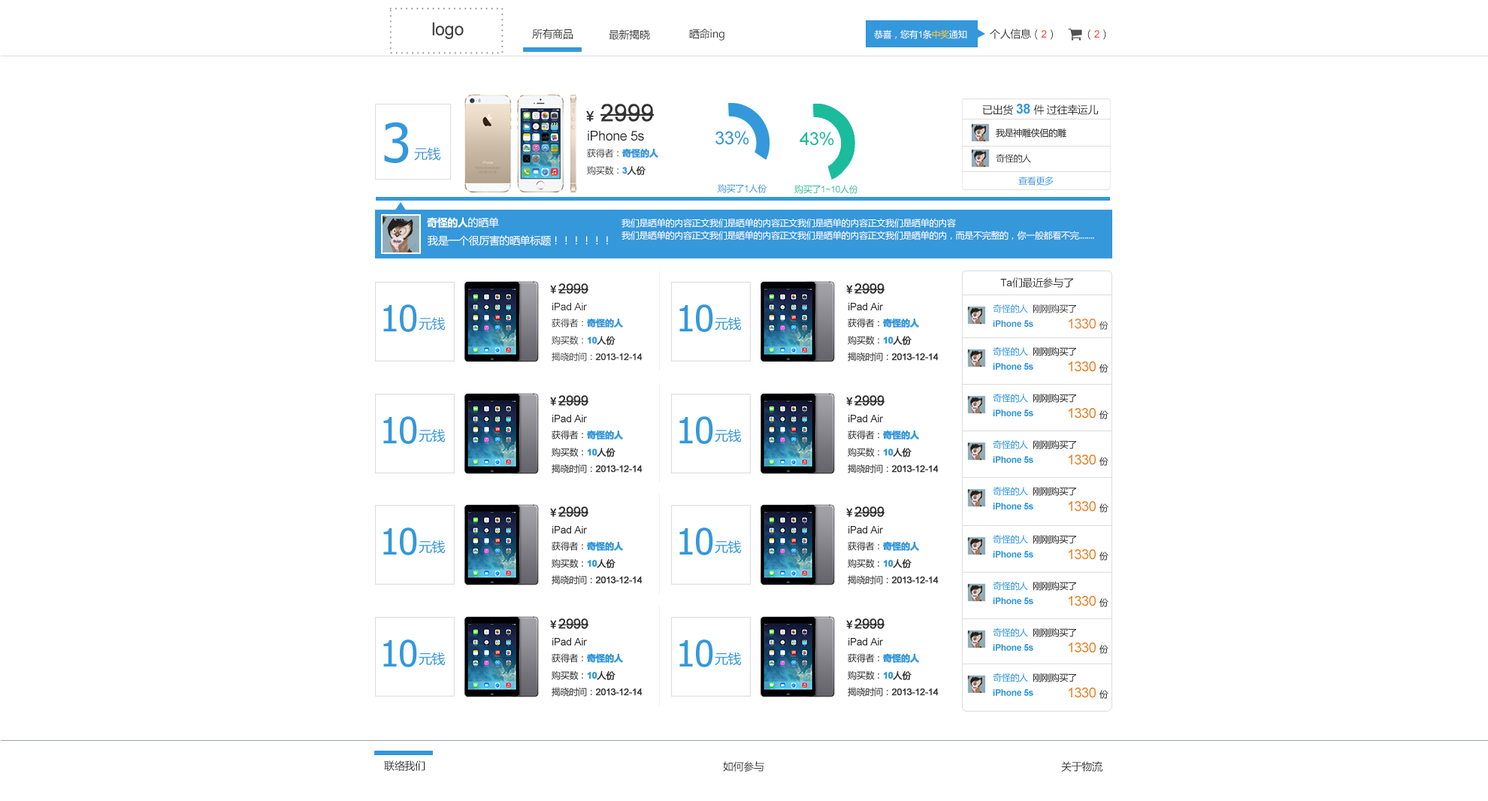
<style>
.page{position:relative;width:1488px;height:801px;background:#ffffff}
.page>*{position:absolute;margin:0}
.t1{font:10.5px "MicrosoftYaHei";letter-spacing:-0.025em;color:#333333}
.t2{font:10.5px "ArialMT";letter-spacing:-0.025em;color:#e74c3c}
.t3{font:9px "MicrosoftYaHei";letter-spacing:-0.025em;color:#ffffff}
.t4{font:9px "ArialMT";letter-spacing:-0.025em;color:#ffffff}
.t5{font:9px "MicrosoftYaHei";letter-spacing:-0.025em;color:#f1c619}
.t6{font:24.1px "ArialMT";letter-spacing:-0.025em;color:#333333;font-weight:bold}
.t7{font:13.5px "MicrosoftYaHei";letter-spacing:-0.025em;color:#333333;font-weight:bold}
.t8{font:13.5px "Arial-BoldMT";letter-spacing:-0.025em;color:#3498db}
.t9{font:54.1px "Tahoma";letter-spacing:-0.025em;color:#3498db}
.t10{font:13.5px "ArialMT";letter-spacing:-0.025em;color:#333333}
.t11{font:18px "ArialMT";letter-spacing:-0.025em;color:#3498db}
.t12{font:18px "ArialMT";letter-spacing:-0.025em;color:#1abc9c}
.t13{font:13.5px "MicrosoftYaHei";letter-spacing:-0.025em;color:#3498db}
.t14{font:9px "MicrosoftYaHei";letter-spacing:-0.025em;color:#333333}
.t15{font:9px "MicrosoftYaHei-Bold";letter-spacing:-0.025em;color:#3498db;font-weight:bold}
.t16{font:9px "Arial-BoldMT";letter-spacing:-0.025em;color:#3498db;font-weight:bold}
.t17{font:9px "MicrosoftYaHei";letter-spacing:-0.025em;color:#333333;font-weight:bold}
.t18{font:9px "MicrosoftYaHei";letter-spacing:-0.025em;color:#3498db}
.t19{font:9px "ArialMT";letter-spacing:-0.025em;color:#3498db}
.t20{font:9px "ArialMT";letter-spacing:-0.025em;color:#1abc9c}
.t21{font:9px "MicrosoftYaHei";letter-spacing:-0.025em;color:#1abc9c}
.t22{font:10.5px "MicrosoftYaHei-Bold";letter-spacing:-0.025em;color:#ffffff}
.t23{font:10.5px "MicrosoftYaHei";letter-spacing:-0.025em;color:#ffffff}
.t24{font:10.5px "ArialMT";letter-spacing:-0.025em;color:#333333}
.t25{font:13.5px "ArialMT";letter-spacing:-0.025em;color:#333333;font-weight:bold}
.t26{font:10.5px "MicrosoftYaHei";letter-spacing:-0.025em;color:#333333;font-weight:bold}
.t27{font:36.1px "Tahoma";letter-spacing:-0.025em;color:#3498db}
.t28{font:9px "Arial-BoldMT";letter-spacing:-0.025em;color:#3498db}
.t29{font:13.5px "ArialMT";letter-spacing:-0.025em;color:#e67e22}
.t30{font:9px "ArialMT";letter-spacing:-0.025em;color:#333333;font-weight:bold}
</style>
<div class="page">
<p class="t1" style="left:532px;top:29px;width:41px;height:10px">所有商品</p>
<p class="t1" style="left:609px;top:29px;width:41px;height:11px">最新揭晓</p>
<p class="t1" style="left:689px;top:29px;width:36px;height:12px">晒命ing</p>
<p class="t1" style="left:990px;top:29px;width:63px;height:11px">个人信息（<span class="t2">2</span>）</p>
<p class="t1" style="left:1088px;top:29px;width:18px;height:11px">（<span class="t2">2</span>）</p>
<p class="t3" style="left:874px;top:30px;width:93px;height:9px">恭喜，您有<span class="t4">1</span>条<span class="t5">中奖</span>通知</p>
<p class="t6" style="left:586px;top:104px;width:69px;height:18px"><span class="t7">￥ </span>2999</p>
<p class="t1" style="left:983px;top:104px;width:116px;height:11px">已出货 <span class="t8">38 </span>件 过往幸运儿</p>
<p class="t9" style="left:384px;top:122px;width:25px;height:41px">3</p>
<p class="t10" style="left:588px;top:131px;width:56px;height:10px">iPhone 5s</p>
<p class="t11" style="left:716px;top:131px;width:33px;height:14px">33%</p>
<p class="t12" style="left:800px;top:132px;width:34px;height:14px">43%</p>
<p class="t13" style="left:414px;top:147px;width:27px;height:14px">元钱</p>
<p class="t14" style="left:587px;top:148px;width:71px;height:10px">获得者：<span class="t15">奇怪的人</span></p>
<p class="t14" style="left:996px;top:154px;width:35px;height:9px">奇怪的人</p>
<p class="t14" style="left:587px;top:166px;width:59px;height:9px">购买数：<span class="t16">3</span><span class="t17">人份</span></p>
<p class="t18" style="left:718px;top:184px;width:49px;height:9px">购买了<span class="t19">1</span>人份</p>
<p class="t20" style="left:794px;top:185px;width:64px;height:9px"><span class="t21">购买了</span>1~10<span class="t21">人份</span></p>
<p class="t18" style="left:1018px;top:177px;width:36px;height:9px">查看更多</p>
<p class="t22" style="left:427px;top:217px;width:72px;height:11px">奇怪的人<span class="t23">的晒单</span></p>
<p class="t3" style="left:622px;top:218px;width:472px;height:23px">我们是晒单的内容正文我们是晒单的内容正文我们是晒单的内容正文我们是晒单的内容<br>我们是晒单的内容正文我们是晒单的内容正文我们是晒单的内容正文我们是晒单的内，而是不完整的，你一般都看不完........</p>
<p class="t23" style="left:428px;top:235px;width:180px;height:11px">我是一个很厉害的晒单标题！！！！！！</p>
<p class="t1" style="left:1000px;top:277px;width:73px;height:11px"><span class="t24">Ta</span>们最近参与了</p>
<p class="t25" style="left:550px;top:283px;width:39px;height:11px"><span class="t26">￥</span>2999</p>
<p class="t27" style="left:383px;top:304px;width:34px;height:28px">10</p>
<p class="t24" style="left:552px;top:303px;width:35px;height:7px">iPad Air</p>
<p class="t14" style="left:993px;top:304px;width:83px;height:9px"><span class="t18">奇怪的人</span>  刚刚购买了</p>
<p class="t13" style="left:419px;top:317px;width:27px;height:14px">元钱</p>
<p class="t14" style="left:552px;top:318px;width:71px;height:10px">获得者：<span class="t15">奇怪的人</span></p>
<p class="t28" style="left:993px;top:320px;width:40px;height:7px">iPhone 5s</p>
<p class="t29" style="left:1069px;top:319px;width:40px;height:11px">1330 <span class="t14">份</span></p>
<p class="t14" style="left:552px;top:336px;width:64px;height:9px">购买数：<span class="t16">10</span><span class="t17">人份</span></p>
<p class="t30" style="left:552px;top:353px;width:91px;height:9px"><span class="t14">揭晓时间：</span>2013-12-14</p>
<p class="t1" style="left:384px;top:761px;width:41px;height:10px">联络我们</p>
<p class="t1" style="left:723px;top:761px;width:41px;height:11px">如何参与</p>
<p class="t1" style="left:1061px;top:761px;width:42px;height:11px">关于物流</p>
</div>
